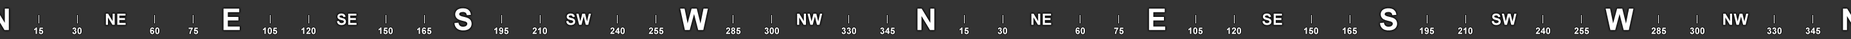
<style>
.page{position:relative;width:1851px;height:39px;background:#333333}
.page>*{position:absolute;margin:0}
.t1{font:15.4px "Arial-BoldMT";letter-spacing:0.02em;color:#ffffff}
.t2{font:29.6px "Arial-BoldMT";letter-spacing:0.02em;color:#ffffff}
.t3{font:9px "Arial-BoldMT";letter-spacing:0.02em;color:#ffffff}
</style>
<div class="page">
<p class="t1" style="left:105px;top:14px;width:21px;height:11px">NE</p>
<p class="t2" style="left:223px;top:8px;width:17px;height:22px">E</p>
<p class="t1" style="left:337px;top:13px;width:20px;height:12px">SE</p>
<p class="t2" style="left:455px;top:8px;width:17px;height:22px">S</p>
<p class="t1" style="left:566px;top:13px;width:25px;height:12px">SW</p>
<p class="t2" style="left:680px;top:8px;width:28px;height:22px">W</p>
<p class="t1" style="left:797px;top:14px;width:26px;height:11px">NW</p>
<p class="t2" style="left:917px;top:8px;width:18px;height:22px">N</p>
<p class="t1" style="left:1031px;top:14px;width:21px;height:11px">NE</p>
<p class="t2" style="left:1149px;top:8px;width:17px;height:22px">E</p>
<p class="t1" style="left:1263px;top:13px;width:19px;height:12px">SE</p>
<p class="t2" style="left:1380px;top:8px;width:18px;height:22px">S</p>
<p class="t1" style="left:1492px;top:13px;width:25px;height:12px">SW</p>
<p class="t2" style="left:1606px;top:8px;width:28px;height:22px">W</p>
<p class="t1" style="left:1724px;top:14px;width:25px;height:11px">NW</p>
<p class="t3" style="left:34px;top:27px;width:10px;height:7px">15</p>
<p class="t3" style="left:72px;top:27px;width:10px;height:7px">30</p>
<p class="t3" style="left:150px;top:27px;width:9px;height:7px">60</p>
<p class="t3" style="left:188px;top:27px;width:11px;height:7px">75</p>
<p class="t3" style="left:263px;top:27px;width:15px;height:7px">105</p>
<p class="t3" style="left:302px;top:27px;width:14px;height:7px">120</p>
<p class="t3" style="left:379px;top:27px;width:14px;height:7px">150</p>
<p class="t3" style="left:417px;top:27px;width:15px;height:7px">165</p>
<p class="t3" style="left:494px;top:27px;width:15px;height:7px">195</p>
<p class="t3" style="left:532px;top:27px;width:15px;height:7px">210</p>
<p class="t3" style="left:610px;top:27px;width:15px;height:7px">240</p>
<p class="t3" style="left:649px;top:27px;width:15px;height:7px">255</p>
<p class="t3" style="left:726px;top:27px;width:15px;height:7px">285</p>
<p class="t3" style="left:764px;top:27px;width:15px;height:7px">300</p>
<p class="t3" style="left:842px;top:27px;width:14px;height:7px">330</p>
<p class="t3" style="left:880px;top:27px;width:16px;height:7px">345</p>
<p class="t3" style="left:960px;top:27px;width:9px;height:7px">15</p>
<p class="t3" style="left:998px;top:27px;width:9px;height:7px">30</p>
<p class="t3" style="left:1076px;top:27px;width:9px;height:7px">60</p>
<p class="t3" style="left:1114px;top:27px;width:10px;height:7px">75</p>
<p class="t3" style="left:1189px;top:27px;width:14px;height:7px">105</p>
<p class="t3" style="left:1227px;top:27px;width:14px;height:7px">120</p>
<p class="t3" style="left:1304px;top:27px;width:14px;height:7px">150</p>
<p class="t3" style="left:1343px;top:27px;width:15px;height:7px">165</p>
<p class="t3" style="left:1420px;top:27px;width:15px;height:7px">195</p>
<p class="t3" style="left:1458px;top:27px;width:15px;height:7px">210</p>
<p class="t3" style="left:1536px;top:27px;width:15px;height:7px">240</p>
<p class="t3" style="left:1574px;top:27px;width:16px;height:7px">255</p>
<p class="t3" style="left:1652px;top:27px;width:15px;height:7px">285</p>
<p class="t3" style="left:1690px;top:27px;width:15px;height:7px">300</p>
<p class="t3" style="left:1767px;top:27px;width:15px;height:7px">330</p>
<p class="t3" style="left:1806px;top:27px;width:15px;height:7px">345</p>
</div>
